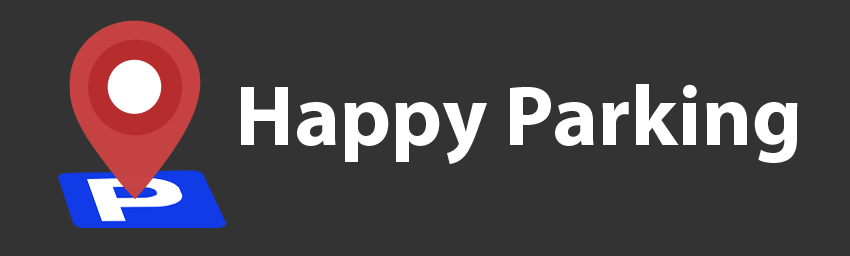
<style>
.page{position:relative;width:850px;height:256px;background:#333333}
.page>*{position:absolute;margin:0}
.t1{font:86px "MyriadPro-Bold";color:#ffffff}
</style>
<div class="page">
<p class="t1" style="left:241px;top:84px;width:557px;height:80px">Happy Parking</p>
</div>
